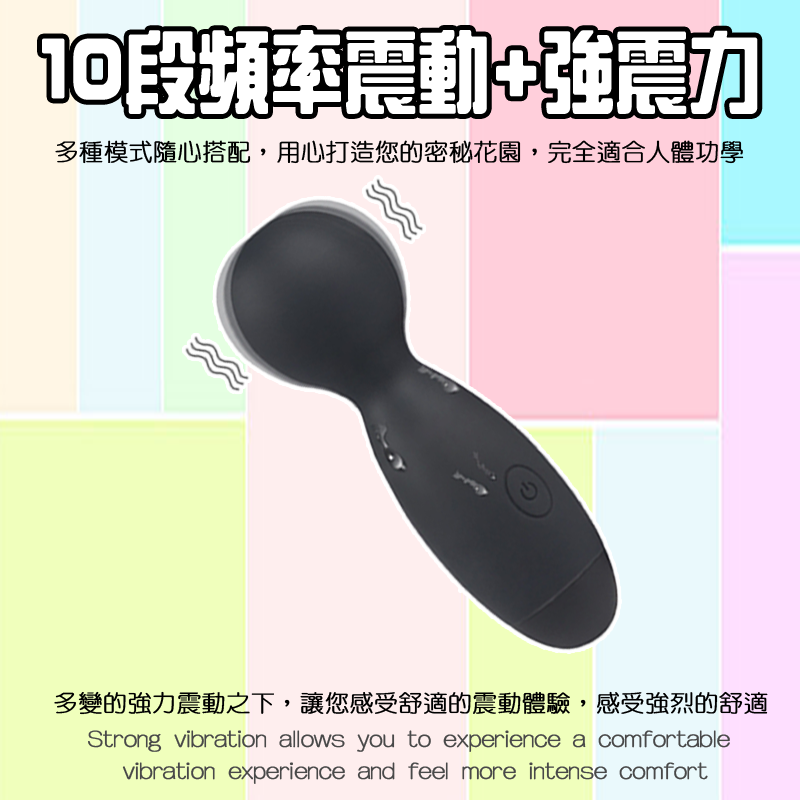
<style>
.page{position:relative;width:800px;height:800px}
.page>*{position:absolute;margin:0}
.t1{font:88px "HanWangZonYi";color:#ffffff;font-weight:bold;scale:0.81 1}
.t2{font:24px "HanWangYenLight";color:#000000;font-weight:bold}
.t3{font:23.5px "HanWangYenLight";color:#000000;font-weight:bold}
.t4{font:24px "HanWangYenLight";color:#494949;font-weight:bold}
</style>
<div class="page">
<p class="t1" style="left:42px;top:30px;width:716px;height:84px">10段頻率震動+強震力</p>
<p class="t2" style="left:55px;top:140px;width:689px;height:24px">多種模式隨心搭配，用心打造您的密秘花園，完全適合人體功學</p>
<p class="t3" style="left:54px;top:691px;width:714px;height:24px">多變的強力震動之下，讓您感受舒適的震動體驗，感受強烈的舒適</p>
<p class="t4" style="left:88px;top:730px;width:642px;height:54px;text-align:center">Strong vibration allows you to experience a comfortable <br>vibration experience and feel more intense comfort</p>
</div>
